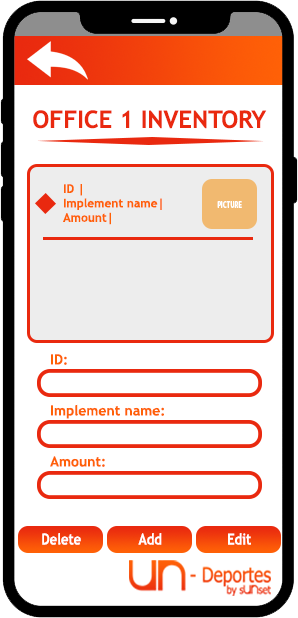
<style>
.page{position:relative;width:298px;height:618px;background:#ffffff}
.page>*{position:absolute;margin:0}
.t1{font:24px "TrebuchetMS-Bold";color:#e9290f}
.t2{font:12px "TrebuchetMS-Bold";color:#ff6107}
.t3{font:9px "MyriadPro-Bold";color:#ffffff;scale:0.7 1}
.t4{font:14px "TrebuchetMS-Bold";color:#ff6107}
.t5{font:15.4px "TrebuchetMS-Bold";color:#ffffff;scale:0.85 1}
</style>
<div class="page">
<p class="t1" style="left:33px;top:110px;width:234px;height:19px">OFFICE 1 INVENTORY</p>
<p class="t2" style="left:63px;top:184px;width:99px;height:41px">ID |<br>Implement name| <br>Amount|</p>
<p class="t3" style="left:217px;top:201px;width:25px;height:7px">PICTURE</p>
<p class="t4" style="left:51px;top:354px;width:16px;height:11px">ID:</p>
<p class="t4" style="left:51px;top:404px;width:113px;height:15px">Implement name:</p>
<p class="t4" style="left:50px;top:456px;width:55px;height:11px">Amount:</p>
<p class="t5" style="left:42px;top:533px;width:39px;height:12px">Delete</p>
<p class="t5" style="left:138px;top:533px;width:24px;height:12px">Add</p>
<p class="t5" style="left:228px;top:533px;width:23px;height:12px">Edit</p>
</div>
